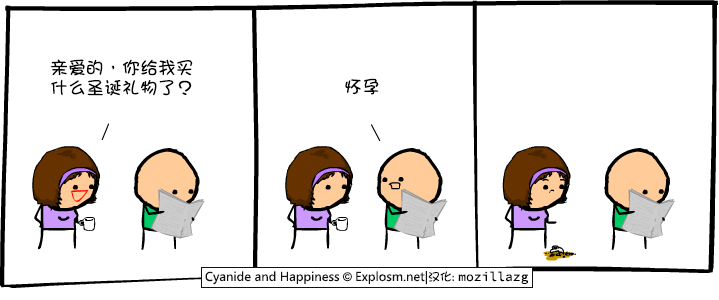
<style>
.page{position:relative;width:719px;height:300px;background:#ffffff}
.page>*{position:absolute;margin:0}
.t1{font:18px/20px "DFGirl";color:#000000}
.t2{font:18px "DFGirl";color:#000000}
</style>
<div class="page">
<p class="t1" style="left:50px;top:59px;width:143px;height:37px">亲爱的，你给我买<br>什么圣诞礼物了？</p>
<p class="t2" style="left:345px;top:78px;width:34px;height:17px">怀孕</p>
</div>
